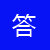
<style>
.page{position:relative;width:50px;height:50px;background:#0712f5}
.page>*{position:absolute;margin:0}
.t1{font:24px "MicrosoftYaHei";color:#fefcfc}
</style>
<div class="page">
<p class="t1" style="left:12px;top:14px;width:24px;height:23px">答</p>
</div>
